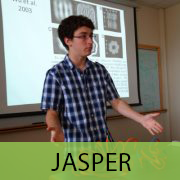
<style>
.page{position:relative;width:180px;height:180px}
.page>*{position:absolute;margin:0}
.t1{font:26.7px "MyriadPro-Regular";color:#030303}
</style>
<div class="page">
<p class="t1" style="left:51px;top:153px;width:80px;height:18px">JASPER</p>
</div>
